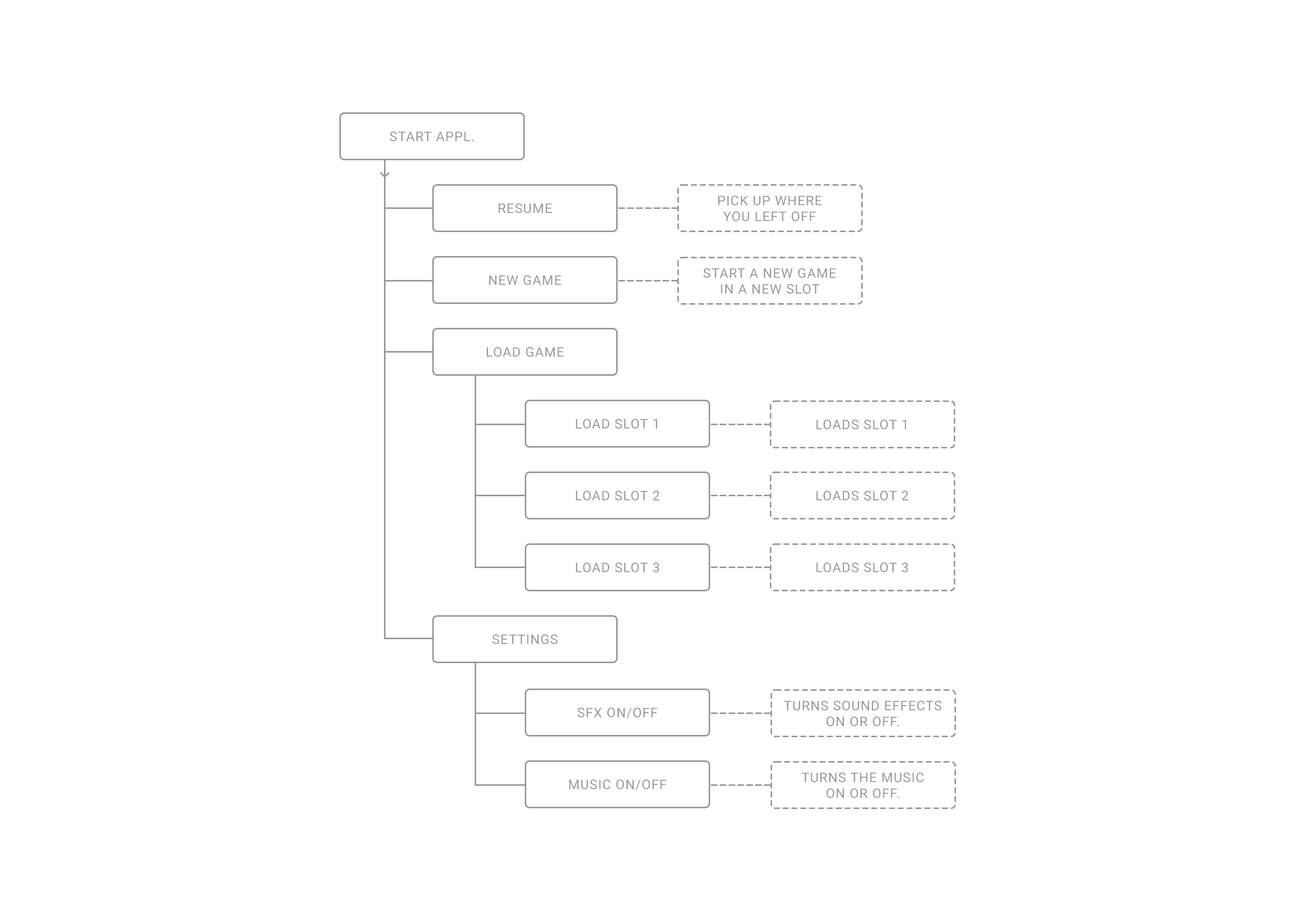
<style>
.page{position:relative;width:1295px;height:921px;background:#ffffff}
.page>*{position:absolute;margin:0}
.t1{font:13.3px "Roboto-Regular";letter-spacing:0.05em;color:#969696}
</style>
<div class="page">
<p class="t1" style="left:390px;top:132px;width:83px;height:9px">START APPL.</p>
<p class="t1" style="left:718px;top:196px;width:104px;height:25px;text-align:center">PICK UP WHERE<br>YOU LEFT OFF</p>
<p class="t1" style="left:498px;top:203px;width:54px;height:10px">RESUME</p>
<p class="t1" style="left:703px;top:268px;width:133px;height:26px;text-align:center">START A NEW GAME<br>IN A NEW SLOT</p>
<p class="t1" style="left:489px;top:275px;width:72px;height:10px">NEW GAME</p>
<p class="t1" style="left:486px;top:347px;width:78px;height:10px">LOAD GAME</p>
<p class="t1" style="left:576px;top:419px;width:81px;height:10px">LOAD SLOT 1</p>
<p class="t1" style="left:816px;top:420px;width:90px;height:10px">LOADS SLOT 1</p>
<p class="t1" style="left:576px;top:491px;width:83px;height:10px">LOAD SLOT 2</p>
<p class="t1" style="left:816px;top:491px;width:92px;height:10px">LOADS SLOT 2</p>
<p class="t1" style="left:576px;top:563px;width:83px;height:10px">LOAD SLOT 3</p>
<p class="t1" style="left:816px;top:563px;width:92px;height:10px">LOADS SLOT 3</p>
<p class="t1" style="left:492px;top:634px;width:65px;height:10px">SETTINGS</p>
<p class="t1" style="left:784px;top:701px;width:157px;height:26px;text-align:center">TURNS SOUND EFFECTS<br>ON OR OFF.</p>
<p class="t1" style="left:577px;top:708px;width:80px;height:10px">SFX ON/OFF</p>
<p class="t1" style="left:801px;top:773px;width:123px;height:25px;text-align:center">TURNS THE MUSIC<br>ON OR OFF.</p>
<p class="t1" style="left:569px;top:780px;width:97px;height:10px">MUSIC ON/OFF</p>
</div>
